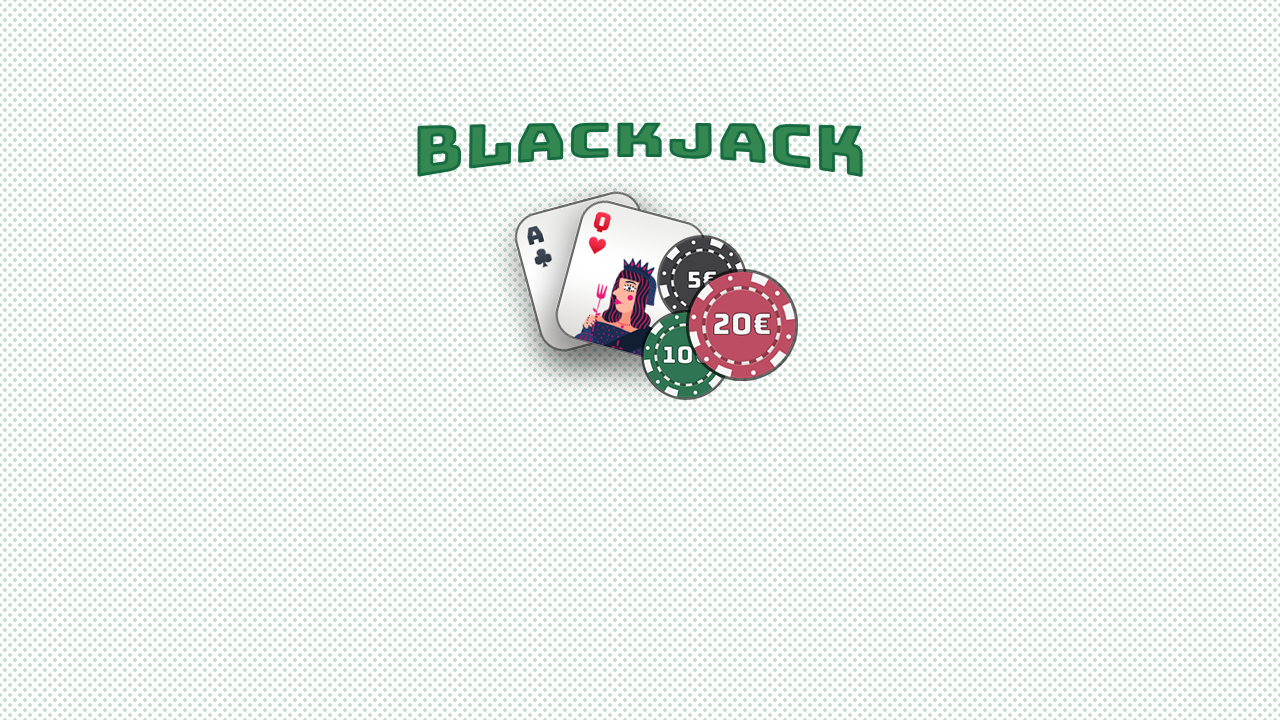
<style>
.page{position:relative;width:1280px;height:720px;background:#c5dece}
.page>*{position:absolute;margin:0}
.t1{font:72px "Bungee-Regular";color:#348751}
</style>
<div class="page">
<p class="t1" style="left:417px;top:122px;width:446px;height:55px">BLACKJACK</p>
</div>
